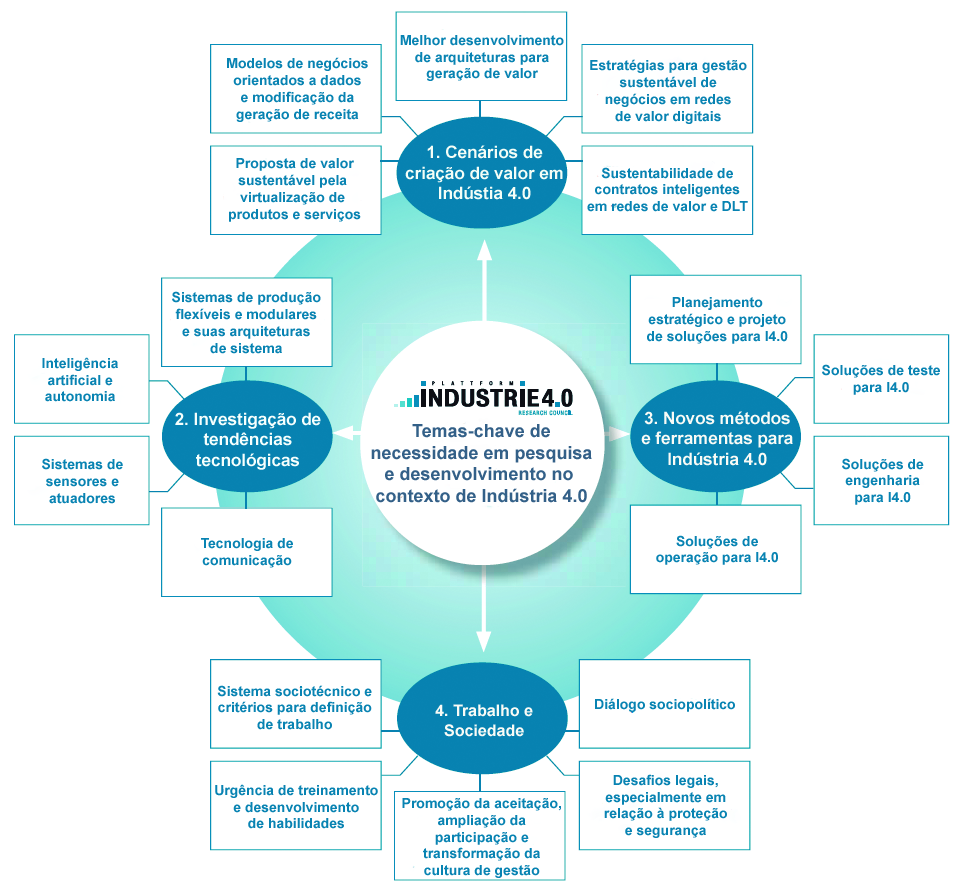
<style>
.page{position:relative;width:965px;height:888px;background:#ffffff}
.page>*{position:absolute;margin:0}
.t1{font:14px "Arial-BoldMT";color:#0883b2}
.t2{font:17px "Arial-BoldMT";color:#f4fef7}
.t3{font:17px "Arial-BoldMT";color:#f6fffd}
.t4{font:17px "Arial-BoldMT";color:#f9fbf6}
.t5{font:18px "Arial-BoldMT";color:#336088}
.t6{font:16px "Arial-BoldMT";color:#f9fbf6}
</style>
<div class="page">
<p class="t1" style="left:400px;top:35px;width:164px;height:46px;text-align:center">Melhor desenvolvimento<br>de arquiteturas para<br>geração de valor</p>
<p class="t1" style="left:227px;top:57px;width:141px;height:65px;text-align:center">Modelos de negócios<br>orientados a dados<br>e modificação da<br>geração de receita</p>
<p class="t1" style="left:590px;top:59px;width:157px;height:65px;text-align:center">Estratégias para gestão<br>sustentável de<br>negócios em redes<br>de valor digitais</p>
<p class="t2" style="left:405px;top:145px;width:158px;height:55px;text-align:center">1. Cenários de<br>criação de valor em<br>Indústia 4.0</p>
<p class="t1" style="left:229px;top:158px;width:132px;height:64px;text-align:center">Proposta de valor<br>sustentável pela <br>virtualização de <br>produtos e serviços</p>
<p class="t1" style="left:587px;top:167px;width:161px;height:45px;text-align:center">Sustentabilidade de<br>contratos inteligentes<br>em redes de valor e DLT</p>
<p class="t1" style="left:172px;top:291px;width:149px;height:63px;text-align:center">Sistemas de produção<br>flexíveis e modulares<br>e suas arquiteturas<br>de sistema</p>
<p class="t1" style="left:647px;top:297px;width:141px;height:47px;text-align:center">Planejamento<br>estratégico e projeto<br>de soluções para I4.0</p>
<p class="t1" style="left:42px;top:357px;width:76px;height:45px;text-align:center">Inteligência<br>artificial e<br>autonomia</p>
<p class="t1" style="left:822px;top:364px;width:118px;height:31px;text-align:center">Soluções de teste<br>para I4.0</p>
<p class="t3" style="left:175px;top:412px;width:146px;height:58px;text-align:center">2. Investigação de<br>tendências<br>tecnológicas</p>
<p class="t4" style="left:641px;top:411px;width:152px;height:55px;text-align:center">3. Novos métodos<br>e ferramentas para<br>Indústria 4.0</p>
<p class="t5" style="left:371px;top:424px;width:221px;height:79px;text-align:center">Temas-chave de<br>necessidade em pesquisa<br>e desenvolvimento no <br>contexto de Indústria 4.0</p>
<p class="t1" style="left:42px;top:458px;width:81px;height:46px;text-align:center">Sistemas de<br>sensores e<br>atuadores</p>
<p class="t1" style="left:842px;top:458px;width:82px;height:47px;text-align:center">Soluções de<br>engenharia<br>para I4.0</p>
<p class="t1" style="left:201px;top:538px;width:92px;height:30px;text-align:center">Tecnologia de<br>comunicação</p>
<p class="t1" style="left:656px;top:535px;width:122px;height:30px;text-align:center">Soluções de<br>operação para I4.0</p>
<p class="t1" style="left:217px;top:685px;width:155px;height:45px;text-align:center">Sistema sociotécnico e<br>critérios para definição<br>de trabalho</p>
<p class="t1" style="left:595px;top:698px;width:140px;height:14px">Diálogo sociopolítico</p>
<p class="t6" style="left:435px;top:704px;width:98px;height:33px;text-align:center">4. Trabalho e<br>Sociedade</p>
<p class="t1" style="left:604px;top:774px;width:123px;height:64px;text-align:center">Desafios legais,<br>especialmente em<br>relação à proteção<br>e segurança</p>
<p class="t1" style="left:215px;top:784px;width:163px;height:45px;text-align:center">Urgência de treinamento<br>e desenvolvimento<br>de habilidades</p>
<p class="t1" style="left:402px;top:798px;width:159px;height:80px;text-align:center">Promoção da aceitação,<br>ampliação da<br>participação e<br>transformação da<br>cultura de gestão</p>
</div>
